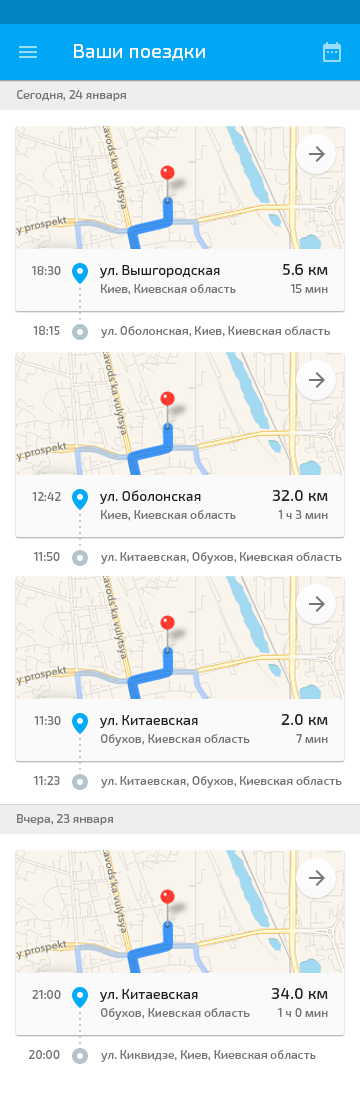
<style>
.page{position:relative;width:360px;height:1110px;background:#ffffff}
.page>*{position:absolute;margin:0}
.t1{font:20px "Exo2.0-Regular";color:#ffffff}
.t2{font:12px "Exo2.0-Regular";letter-spacing:0.01em;color:#757575}
.t3{font:12px/18px "Exo2.0-Regular";letter-spacing:0.01em;color:#757575}
.t4{font:14px/18px "Exo2.0-Regular";letter-spacing:0.005em;color:#212121}
.t5{font:16px/18px "Exo2.0-Medium";letter-spacing:0.005em;color:#212121}
</style>
<div class="page">
<p class="t1" style="left:74px;top:44px;width:131px;height:17px">Ваши поездки</p>
<p class="t2" style="left:17px;top:90px;width:109px;height:11px">Сегодня, 24 января</p>
<p class="t2" style="left:32px;top:266px;width:29px;height:9px">18:30</p>
<p class="t3" style="left:100px;top:265px;width:136px;height:30px"><span class="t4">ул. Вышгородская<br></span>Киев, Киевская область</p>
<p class="t5" style="left:282px;top:264px;width:46px;height:29px;text-align:right">5.6 км<br><span class="t3">15 мин</span></p>
<p class="t2" style="left:33px;top:326px;width:27px;height:9px">18:15</p>
<p class="t2" style="left:101px;top:326px;width:229px;height:12px">ул. Оболонская, Киев, Киевская область</p>
<p class="t2" style="left:32px;top:492px;width:29px;height:9px">12:42</p>
<p class="t3" style="left:100px;top:490px;width:136px;height:31px"><span class="t4">ул. Оболонская<br></span>Киев, Киевская область</p>
<p class="t3" style="left:272px;top:490px;width:56px;height:29px;text-align:right"><span class="t5">32.0 км<br></span>1 ч 3 мин</p>
<p class="t2" style="left:34px;top:552px;width:26px;height:9px">11:50</p>
<p class="t2" style="left:101px;top:552px;width:241px;height:12px">ул. Китаевская, Обухов, Киевская область</p>
<p class="t2" style="left:34px;top:716px;width:27px;height:9px">11:30</p>
<p class="t3" style="left:100px;top:715px;width:150px;height:31px"><span class="t4">ул. Китаевская<br></span>Обухов, Киевская область</p>
<p class="t5" style="left:281px;top:714px;width:47px;height:29px;text-align:right">2.0 км<br><span class="t3">7 мин</span></p>
<p class="t2" style="left:34px;top:776px;width:26px;height:9px">11:23</p>
<p class="t2" style="left:101px;top:776px;width:241px;height:12px">ул. Китаевская, Обухов, Киевская область</p>
<p class="t2" style="left:17px;top:814px;width:96px;height:11px">Вчера, 23 января</p>
<p class="t2" style="left:32px;top:990px;width:29px;height:9px">21:00</p>
<p class="t3" style="left:100px;top:989px;width:150px;height:31px"><span class="t4">ул. Китаевская<br></span>Обухов, Киевская область</p>
<p class="t3" style="left:271px;top:988px;width:57px;height:29px;text-align:right"><span class="t5">34.0 км<br></span>1 ч 0 мин</p>
<p class="t2" style="left:29px;top:1050px;width:31px;height:9px">20:00</p>
<p class="t2" style="left:101px;top:1050px;width:215px;height:12px">ул. Киквидзе, Киев, Киевская область</p>
</div>
